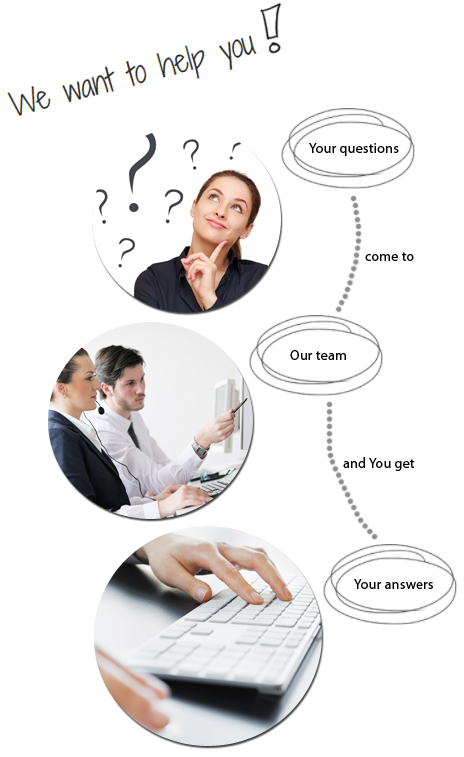
<style>
.page{position:relative;width:464px;height:757px;background:#ffffff}
.page>*{position:absolute;margin:0}
.t1{font:14.6px "MyriadPro-Regular";letter-spacing:0.02em;color:#000000;scale:0.95 1}
</style>
<div class="page">
<p class="t1" style="left:309px;top:143px;width:90px;height:13px">Your questions</p>
<p class="t1" style="left:365px;top:252px;width:49px;height:9px">come to</p>
<p class="t1" style="left:290px;top:350px;width:56px;height:10px">Our team</p>
<p class="t1" style="left:343px;top:457px;width:72px;height:14px">and You get</p>
<p class="t1" style="left:354px;top:579px;width:79px;height:10px">Your answers</p>
</div>
